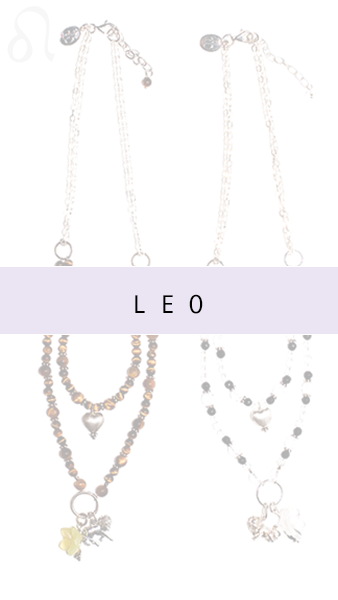
<style>
.page{position:relative;width:338px;height:600px;background:#ffffff}
.page>*{position:absolute;margin:0}
.t1{font:23.5px "Ayuthaya";color:#000000}
</style>
<div class="page">
<p class="t1" style="left:135px;top:294px;width:68px;height:20px">L E O</p>
</div>
